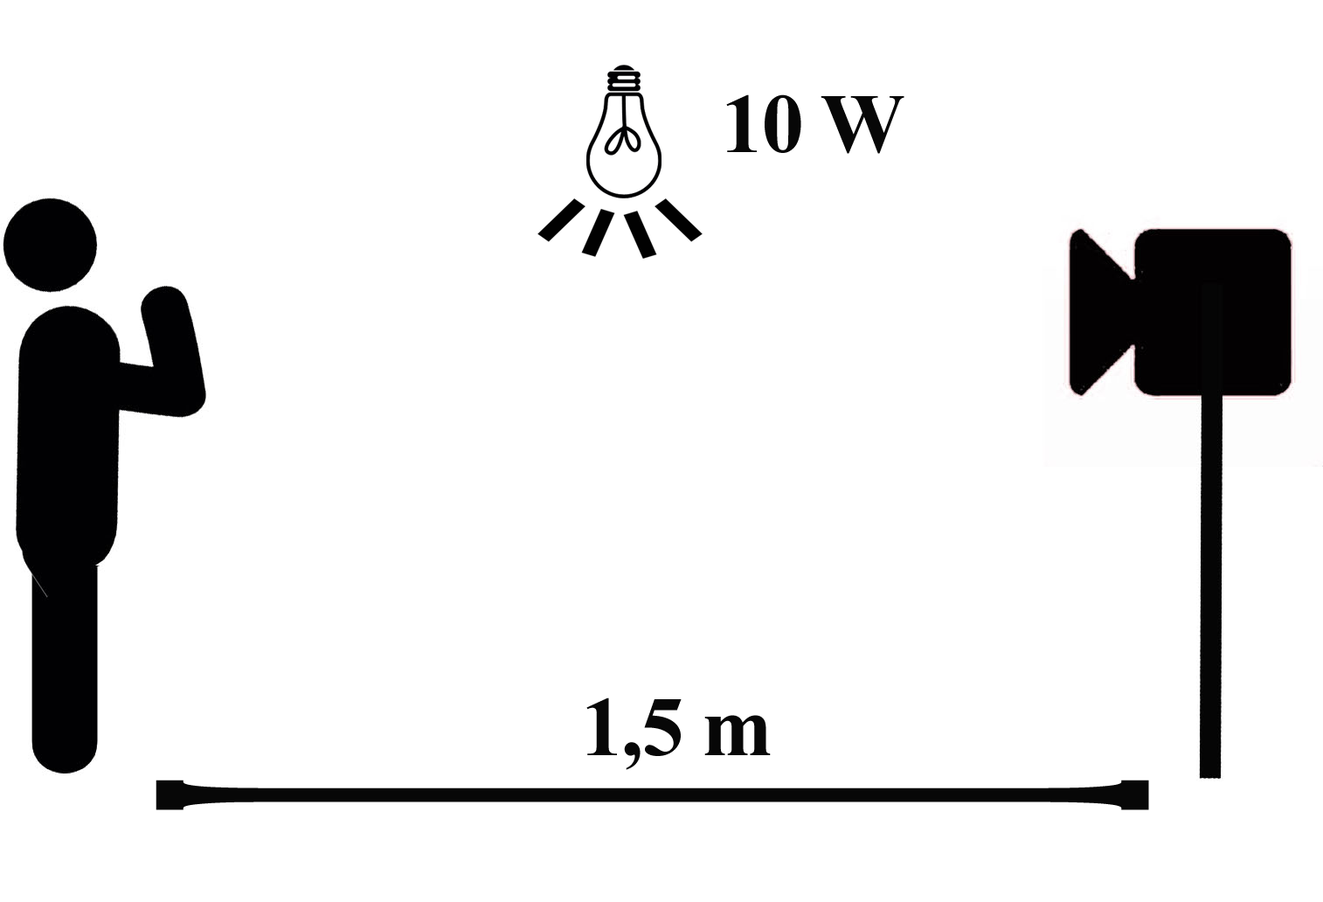
<style>
.page{position:relative;width:1323px;height:902px;background:#ffffff}
.page>*{position:absolute;margin:0}
.t1{font:84.4px "TimesNewRomanPS-BoldMT";letter-spacing:-0.017em;color:#070707}
</style>
<div class="page">
<p class="t1" style="left:726px;top:94px;width:178px;height:60px">10 W</p>
<p class="t1" style="left:586px;top:697px;width:185px;height:73px">1,5 m</p>
</div>
